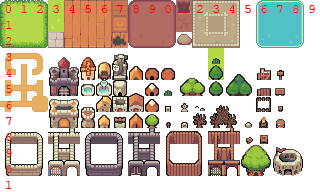
<style>
.page{position:relative;width:320px;height:192px;background:#ffffff}
.page>*{position:absolute;margin:0}
.t1{font:12px "CourierNewPSMT";color:#ff0000;scale:1.11 1}
.t2{font:12px/16px "CourierNewPSMT";color:#ff0000}
</style>
<div class="page">
<p class="t1" style="left:5px;top:5px;width:310px;height:8px">0 1 2 3 4 5 6 7 8 9 0 1 2 3 4 5 6 7 8 9</p>
<p class="t2" style="left:6px;top:21px;width:6px;height:168px">1<br>2<br>3<br>4<br>5<br>6<br>7<br>8<br>9<br>0<br>1</p>
</div>
